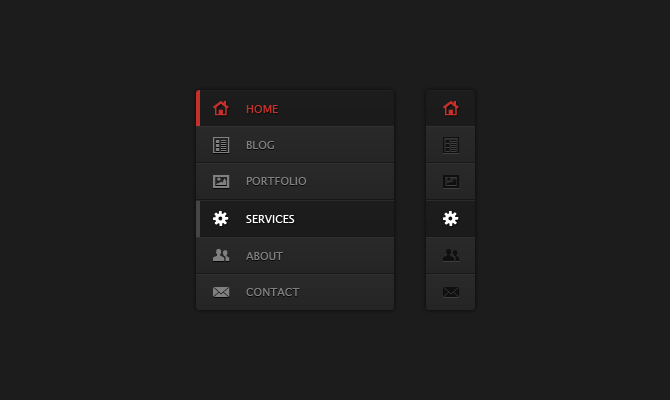
<style>
.page{position:relative;width:670px;height:400px;background:#1c1c1c}
.page>*{position:absolute;margin:0}
.t1{font:11px "LucidaSansUnicode";color:#c4302b;text-transform:uppercase}
.t2{font:11px/36px "LucidaSansUnicode";color:#939393;text-transform:uppercase}
.t3{font:11px "LucidaSansUnicode";color:#ffffff;text-transform:uppercase}
.t4{font:11px/36px "LucidaSansUnicode";color:#808080;text-transform:uppercase}
</style>
<div class="page">
<p class="t1" style="left:246px;top:105px;width:32px;height:8px">Home</p>
<p class="t2" style="left:246px;top:141px;width:61px;height:44px">Blog<br>Portfolio</p>
<p class="t3" style="left:246px;top:215px;width:49px;height:8px">Services</p>
<p class="t4" style="left:246px;top:252px;width:54px;height:44px">About<br>Contact</p>
</div>
